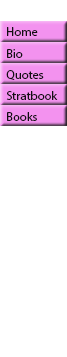
<style>
.page{position:relative;width:67px;height:357px;background:#ffffff}
.page>*{position:absolute;margin:0}
.t1{font:12.5px "MyriadPro-Regular";color:#120f12}
</style>
<div class="page">
<p class="t1" style="left:7px;top:27px;width:31px;height:9px">Home</p>
<p class="t1" style="left:7px;top:49px;width:16px;height:9px">Bio</p>
<p class="t1" style="left:6px;top:70px;width:38px;height:10px">Quotes</p>
<p class="t1" style="left:6px;top:91px;width:52px;height:9px">Stratbook</p>
<p class="t1" style="left:7px;top:112px;width:30px;height:9px">Books</p>
</div>
